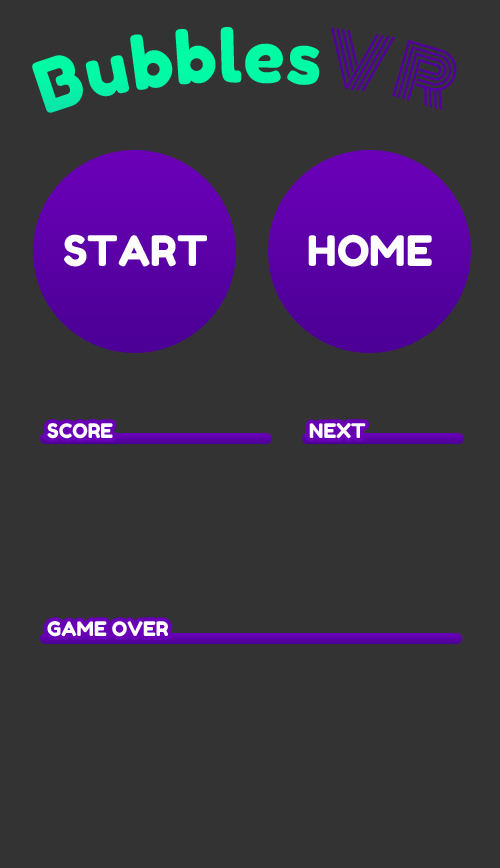
<style>
.page{position:relative;width:500px;height:868px;background:#333333}
.page>*{position:absolute;margin:0}
.t1{font:72px "FredokaOne-Regular";color:#00fba5}
.t2{font:72px "Monoton-Regular";color:#51009b}
.t3{font:42px "FredokaOne-Regular";color:#ffffff;text-transform:uppercase}
.t4{font:20px "FredokaOne-Regular";color:#ffffff;text-transform:uppercase}
</style>
<div class="page">
<p class="t1" style="left:32px;top:27px;width:425px;height:86px">Bubbles<span class="t2">VR</span></p>
<p class="t3" style="left:64px;top:234px;width:143px;height:33px">start</p>
<p class="t3" style="left:308px;top:234px;width:124px;height:33px">home</p>
<p class="t4" style="left:47px;top:423px;width:66px;height:16px">score</p>
<p class="t4" style="left:309px;top:423px;width:57px;height:16px">Next</p>
<p class="t4" style="left:47px;top:621px;width:121px;height:16px">Game over</p>
</div>
